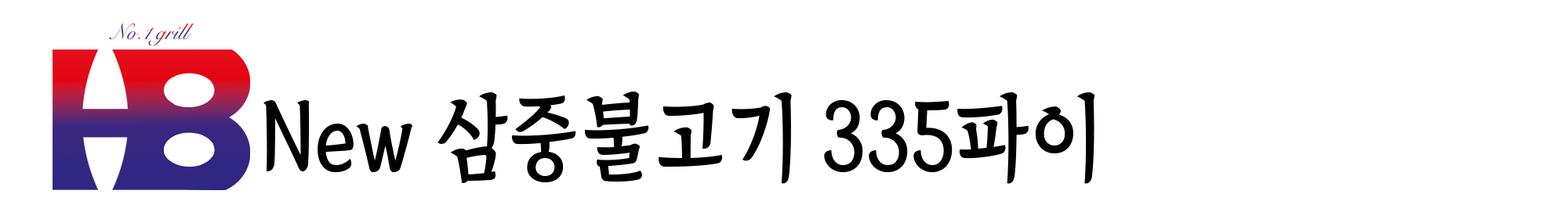
<style>
.page{position:relative;width:1568px;height:205px;background:#ffffff}
.page>*{position:absolute;margin:0}
.t1{font:93.7px "TheIndependenceHallofKorea-Regular";color:#000000;scale:0.89 1}
</style>
<div class="page">
<p class="t1" style="left:263px;top:92px;width:832px;height:92px">New 삼중불고기 335파이</p>
</div>
